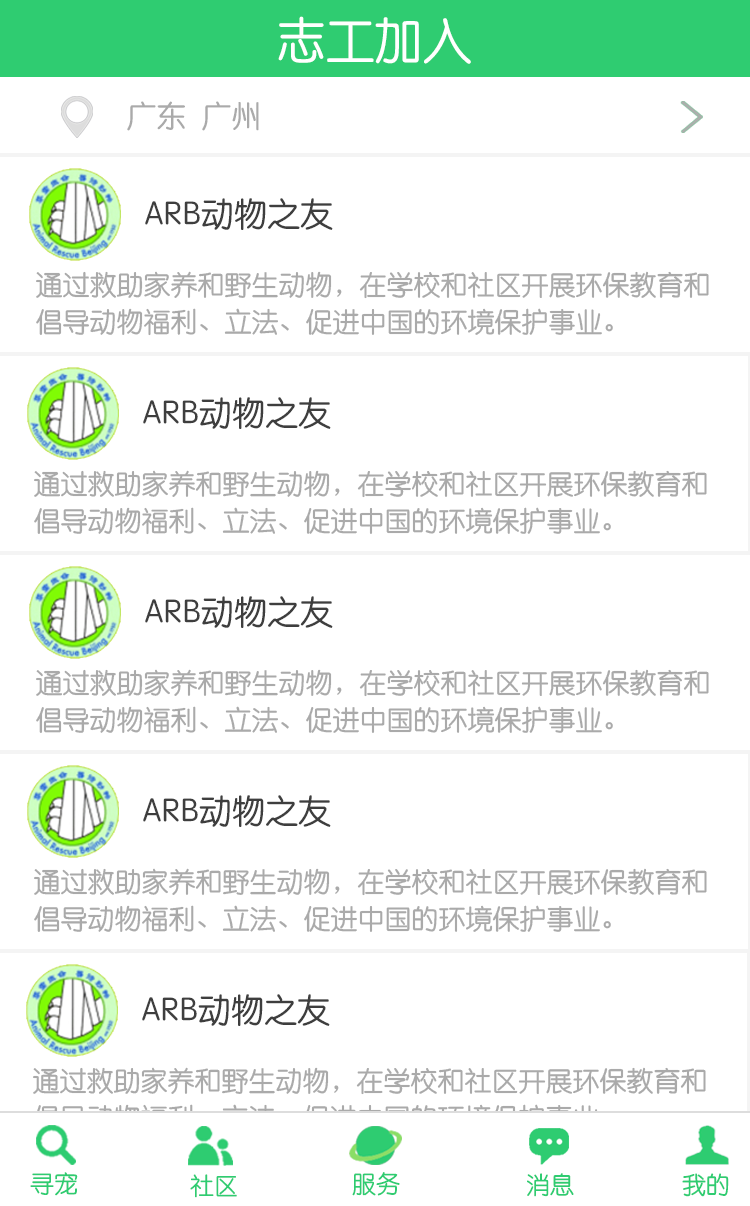
<style>
.page{position:relative;width:750px;height:1206px;background:#ffffff}
.page>*{position:absolute;margin:0}
.t1{font:48.7px "STYuanti-SC-Regular";color:#ffffff}
.t2{font:30px "STYuanti-SC-Regular";color:#aaaaaa}
.t3{font:33px "STYuanti-SC-Regular";color:#3e3e3e}
.t4{font:27px/37px "STYuanti-SC-Regular";color:#aaaaaa}
.t5{font:27px "STYuanti-SC-Regular";color:#aaaaaa}
.t6{font:24px "STYuanti-SC-Regular";color:#2ecc71}
.t7{font:24px "STYuanti-SC-Regular"}
</style>
<div class="page">
<p class="t1" style="left:278px;top:16px;width:193px;height:48px">志工加入</p>
<p class="t2" style="left:127px;top:101px;width:132px;height:30px">广东  广州</p>
<p class="t3" style="left:145px;top:198px;width:188px;height:32px">ARB动物之友</p>
<p class="t4" style="left:36px;top:271px;width:673px;height:65px">通过救助家养和野生动物，在学校和社区开展环保教育和倡导动物福利、立法、促进中国的环境<span class="t5">保护事业。</span></p>
<p class="t3" style="left:143px;top:397px;width:188px;height:32px">ARB动物之友</p>
<p class="t4" style="left:34px;top:470px;width:673px;height:65px">通过救助家养和野生动物，在学校和社区开展环保教育和倡导动物福利、立法、促进中国的环境<span class="t5">保护事业。</span></p>
<p class="t3" style="left:145px;top:596px;width:188px;height:32px">ARB动物之友</p>
<p class="t4" style="left:36px;top:669px;width:673px;height:65px">通过救助家养和野生动物，在学校和社区开展环保教育和倡导动物福利、立法、促进中国的环境<span class="t5">保护事业。</span></p>
<p class="t3" style="left:143px;top:795px;width:188px;height:32px">ARB动物之友</p>
<p class="t4" style="left:34px;top:868px;width:673px;height:65px">通过救助家养和野生动物，在学校和社区开展环保教育和倡导动物福利、立法、促进中国的环境<span class="t5">保护事业。</span></p>
<p class="t3" style="left:142px;top:994px;width:188px;height:32px">ARB动物之友</p>
<p class="t4" style="left:33px;top:1067px;width:673px;height:65px">通过救助家养和野生动物，在学校和社区开展环保教育和倡导动物福利、立法、促进中国的环境<span class="t5">保护事业。</span></p>
<p class="t6" style="left:30px;top:1172px;width:48px;height:24px">寻宠</p>
<p class="t6" style="left:190px;top:1174px;width:47px;height:24px">社区</p>
<p class="t7" style="left:352px;top:1173px;width:48px;height:24px">服务</p>
<p class="t6" style="left:352px;top:1172px;width:48px;height:24px">服务</p>
<p class="t7" style="left:526px;top:1173px;width:47px;height:24px">消息</p>
<p class="t6" style="left:527px;top:1173px;width:47px;height:24px">消息</p>
<p class="t6" style="left:682px;top:1173px;width:47px;height:24px">我的</p>
<p class="t6" style="left:682px;top:1173px;width:47px;height:24px">我的</p>
</div>
